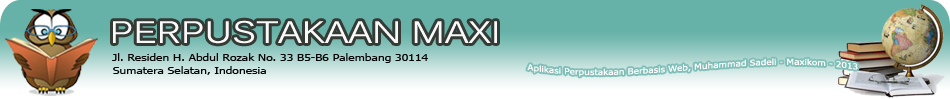
<style>
.page{position:relative;width:950px;height:99px;background:#66b2a8}
.page>*{position:absolute;margin:0}
.t1{font:30.3px "Kalinga";color:#f9f9fb;scale:1.21 1}
.t2{font:10px "Tahoma";color:#040404;scale:1.21 1}
.t3{font:8.4px "Tahoma";color:#ffffff;scale:1.21 1}
.t4{font:10px "Tahoma";color:#000503;scale:1.21 1}
</style>
<div class="page">
<p class="t1" style="left:113px;top:20px;width:384px;height:24px">PERPUSTAKAAN MAXI</p>
<p class="t2" style="left:112px;top:53px;width:316px;height:10px">Jl. Residen H. Abdul Rozak No. 33 B5-B6 Palembang 30114</p>
<p class="t3" style="left:527px;top:58px;width:331px;height:19px;text-align:center">Aplikasi Perpustakaan Berbasis Web, Muhammad Sadeli - Maxikom - 2013</p>
<p class="t4" style="left:113px;top:66px;width:153px;height:9px">Sumatera Selatan, Indonesia</p>
</div>
